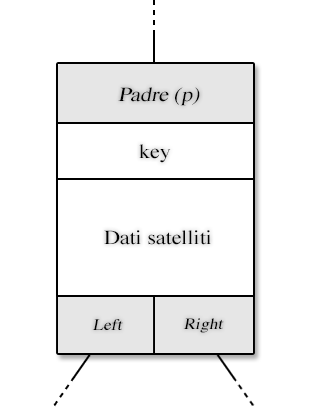
<style>
.page{position:relative;width:314px;height:407px;background:#ffffff}
.page>*{position:absolute;margin:0}
.t1{font:20px "Times-Roman";color:#000000;font-style:italic;scale:1.1 1}
.t2{font:20px "Times-Roman";color:#000000;scale:1.1 1}
.t3{font:15.9px "Times-Roman";color:#000000;font-style:italic;scale:1.11 1}
.t4{font:16px "Times-Roman";color:#000000;font-style:italic;scale:1.1 1}
</style>
<div class="page">
<p class="t1" style="left:118px;top:87px;width:82px;height:19px">Padre (p)</p>
<p class="t2" style="left:139px;top:144px;width:32px;height:19px">key</p>
<p class="t2" style="left:104px;top:230px;width:107px;height:15px">Dati satelliti</p>
<p class="t3" style="left:183px;top:318px;width:41px;height:15px">Right</p>
<p class="t4" style="left:92px;top:319px;width:31px;height:11px">Left</p>
</div>
